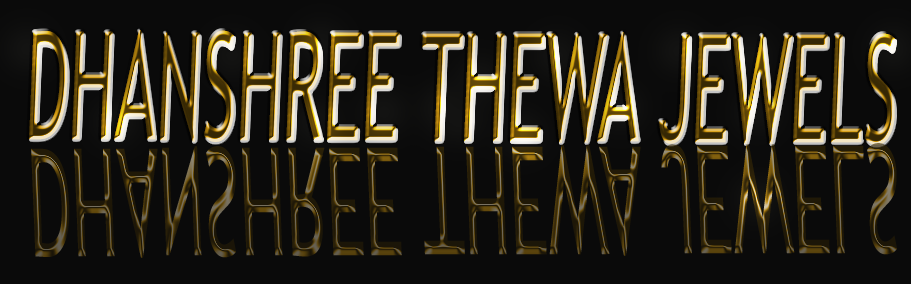
<style>
.page{position:relative;width:911px;height:284px;background:#0a0a0a}
.page>*{position:absolute;margin:0}
.t1{font:150px "TrebuchetMS";scale:0.47 1}
</style>
<div class="page">
<p class="t1" style="left:29px;top:30px;width:866px;height:115px">DHANSHREE THEWA JEWELS</p>
</div>
